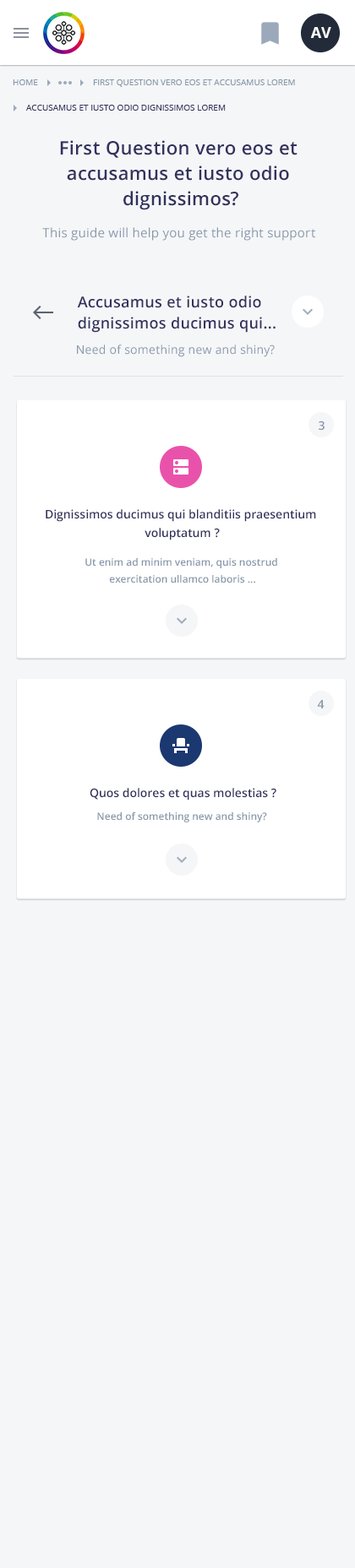
<style>
.page{position:relative;width:355px;height:1568px;background:#f5f6f8}
.page>*{position:absolute;margin:0}
.t1{font:15.2px "OpenSans-Bold";color:#ffffff;text-transform:uppercase}
.t2{font:8.4px "OpenSans";color:#8898aa;text-transform:uppercase}
.t3{font:8.4px "OpenSans";color:#32325d;text-transform:uppercase}
.t4{font:18.6px/25.3px "OpenSans-Semibold";letter-spacing:0.02em;color:#32325d}
.t5{font:12.7px "OpenSans";letter-spacing:0.02em;color:#8898aa}
.t6{font:15.2px/21.1px "OpenSans-Semibold";letter-spacing:0.02em;color:#32325d}
.t7{font:11.8px "OpenSans";letter-spacing:0.02em;color:#8898aa}
.t8{font:11.8px "OpenSans-Semibold";color:#8898aa}
.t9{font:11.8px/18.6px "OpenSans-Semibold";color:#32325d}
.t10{font:10.1px/16.9px "OpenSans-Semibold";color:#8898aa}
.t11{font:11.8px "OpenSans-Semibold";color:#32325d}
.t12{font:10.1px "OpenSans-Semibold";color:#8898aa}
</style>
<div class="page">
<p class="t1" style="left:310px;top:27px;width:21px;height:11px">AV</p>
<p class="t2" style="left:13px;top:79px;width:25px;height:6px">Home</p>
<p class="t2" style="left:93px;top:79px;width:202px;height:8px">First Question vero eos et accusamus lorem</p>
<p class="t3" style="left:26px;top:105px;width:199px;height:6px">Accusamus et iusto odio dignissimos lorem</p>
<p class="t4" style="left:60px;top:140px;width:237px;height:70px;text-align:center">First Question vero eos et <br>accusamus et iusto odio <br>dignissimos?</p>
<p class="t5" style="left:42px;top:227px;width:273px;height:14px">This guide will help you get the right support</p>
<p class="t6" style="left:77px;top:296px;width:198px;height:37px">Accusamus et iusto odio <br>dignissimos ducimus qui...</p>
<p class="t7" style="left:77px;top:345px;width:197px;height:12px">Need of something new and shiny?</p>
<p class="t8" style="left:318px;top:420px;width:6px;height:11px">3</p>
<p class="t9" style="left:46px;top:509px;width:270px;height:31px;text-align:center">Dignissimos ducimus qui blanditiis praesentium <br>voluptatum ?</p>
<p class="t10" style="left:85px;top:558px;width:192px;height:25px;text-align:center">Ut enim ad minim veniam, quis nostrud <br>exercitation ullamco laboris ...</p>
<p class="t8" style="left:317px;top:700px;width:7px;height:8px">4</p>
<p class="t11" style="left:90px;top:788px;width:186px;height:12px">Quos dolores et quas molestias ?</p>
<p class="t12" style="left:97px;top:811px;width:170px;height:11px">Need of something new and shiny?</p>
</div>
